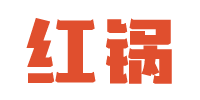
<style>
.page{position:relative;width:200px;height:100px;background:#ffffff}
.page>*{position:absolute;margin:0}
.t1{font:72px "BenmoJinhei";letter-spacing:0.1em;color:#e04f2e}
</style>
<div class="page">
<p class="t1" style="left:26px;top:18px;width:146px;height:66px">红锅</p>
</div>
